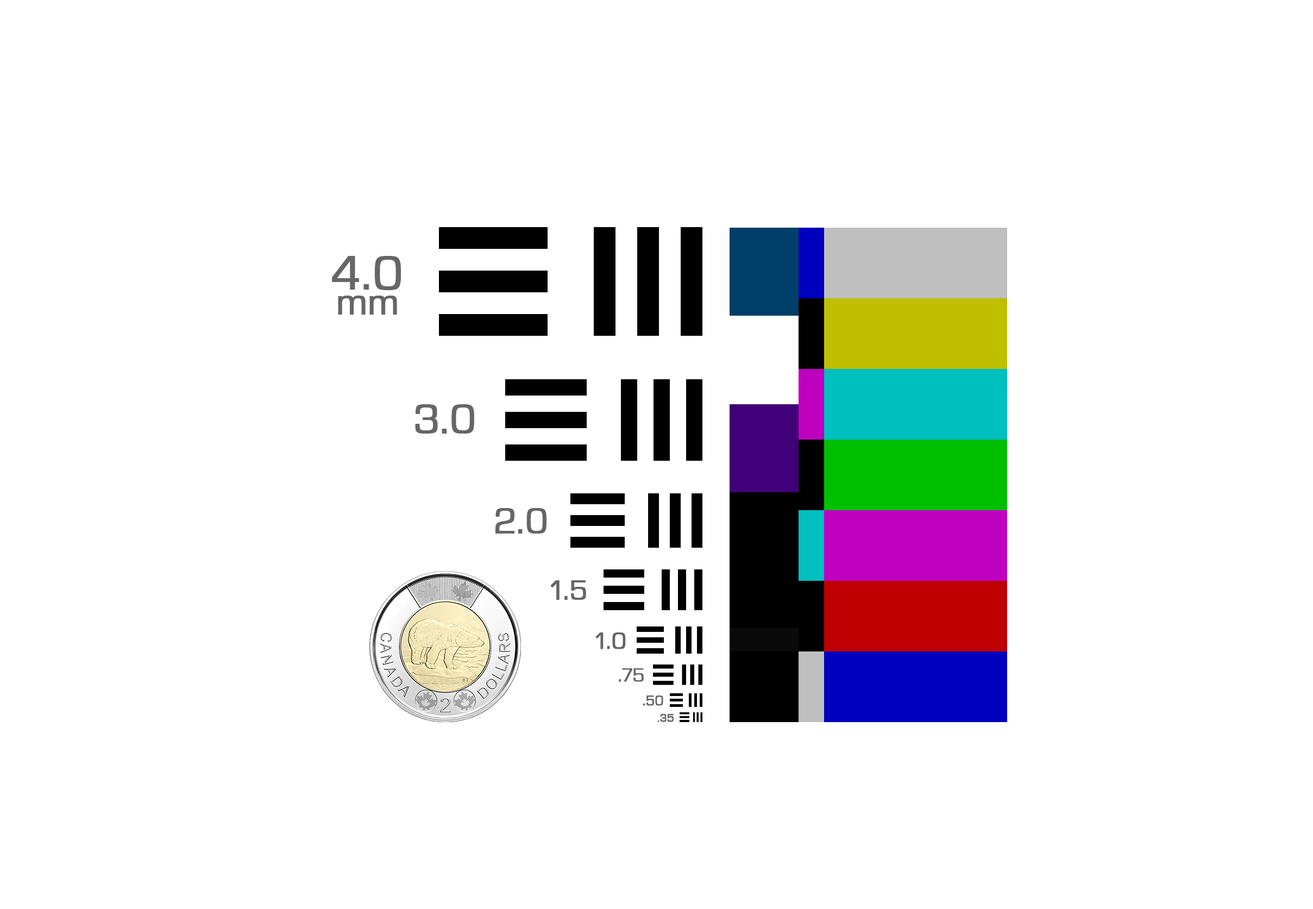
<style>
.page{position:relative;width:1313px;height:909px;background:#ffffff}
.page>*{position:absolute;margin:0}
.t1{font:48.2px "EurostileNextW01-Regular";color:#666666;font-weight:bold}
.t2{font:37.5px "EurostileNextW01-Regular";color:#666666;font-weight:bold}
.t3{font:41.9px "EurostileNextW01-Regular";color:#666666;font-weight:bold}
.t4{font:36.3px "EurostileNextW01-Regular";color:#666666;font-weight:bold}
.t5{font:28px "EurostileNextW01-Regular";color:#666666;font-weight:bold}
.t6{font:23.8px "EurostileNextW01-Regular";color:#666666;font-weight:bold}
.t7{font:18.8px "EurostileNextW01-Regular";color:#666666;font-weight:bold}
.t8{font:14px "EurostileNextW01-Regular";color:#666666;font-weight:bold}
.t9{font:11.1px "EurostileNextW01-Regular";color:#666666;font-weight:bold}
</style>
<div class="page">
<p class="t1" style="left:332px;top:256px;width:69px;height:34px">4.0</p>
<p class="t2" style="left:338px;top:295px;width:59px;height:19px">mm</p>
<p class="t3" style="left:415px;top:404px;width:59px;height:29px">3.0</p>
<p class="t4" style="left:495px;top:508px;width:51px;height:25px">2.0</p>
<p class="t5" style="left:550px;top:580px;width:36px;height:20px">1.5</p>
<p class="t6" style="left:595px;top:632px;width:31px;height:17px">1.0</p>
<p class="t7" style="left:619px;top:668px;width:25px;height:14px">.75</p>
<p class="t8" style="left:642px;top:695px;width:21px;height:10px">.50</p>
<p class="t9" style="left:657px;top:714px;width:17px;height:8px">.35</p>
</div>
